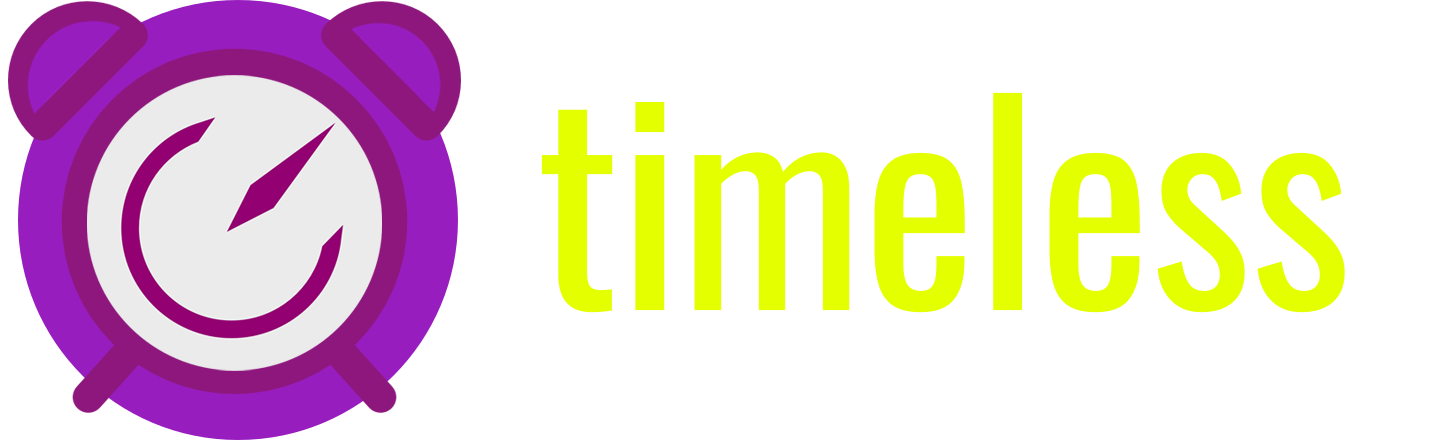
<style>
.page{position:relative;width:1440px;height:440px;background:#ffffff}
.page>*{position:absolute;margin:0}
.t1{font:268.5px "Oswald-Regular";color:#e4ff00}
</style>
<div class="page">
<p class="t1" style="left:541px;top:92px;width:804px;height:221px">timeless</p>
</div>
